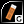
<style>
.page{position:relative;width:24px;height:24px;background:#000000}
.page>*{position:absolute;margin:0}
.t1{font:7.9px "Montserrat-Bold";color:#000000}
</style>
<div class="page">
<p class="t1" style="left:16px;top:16px;width:6px;height:6px">G</p>
</div>
